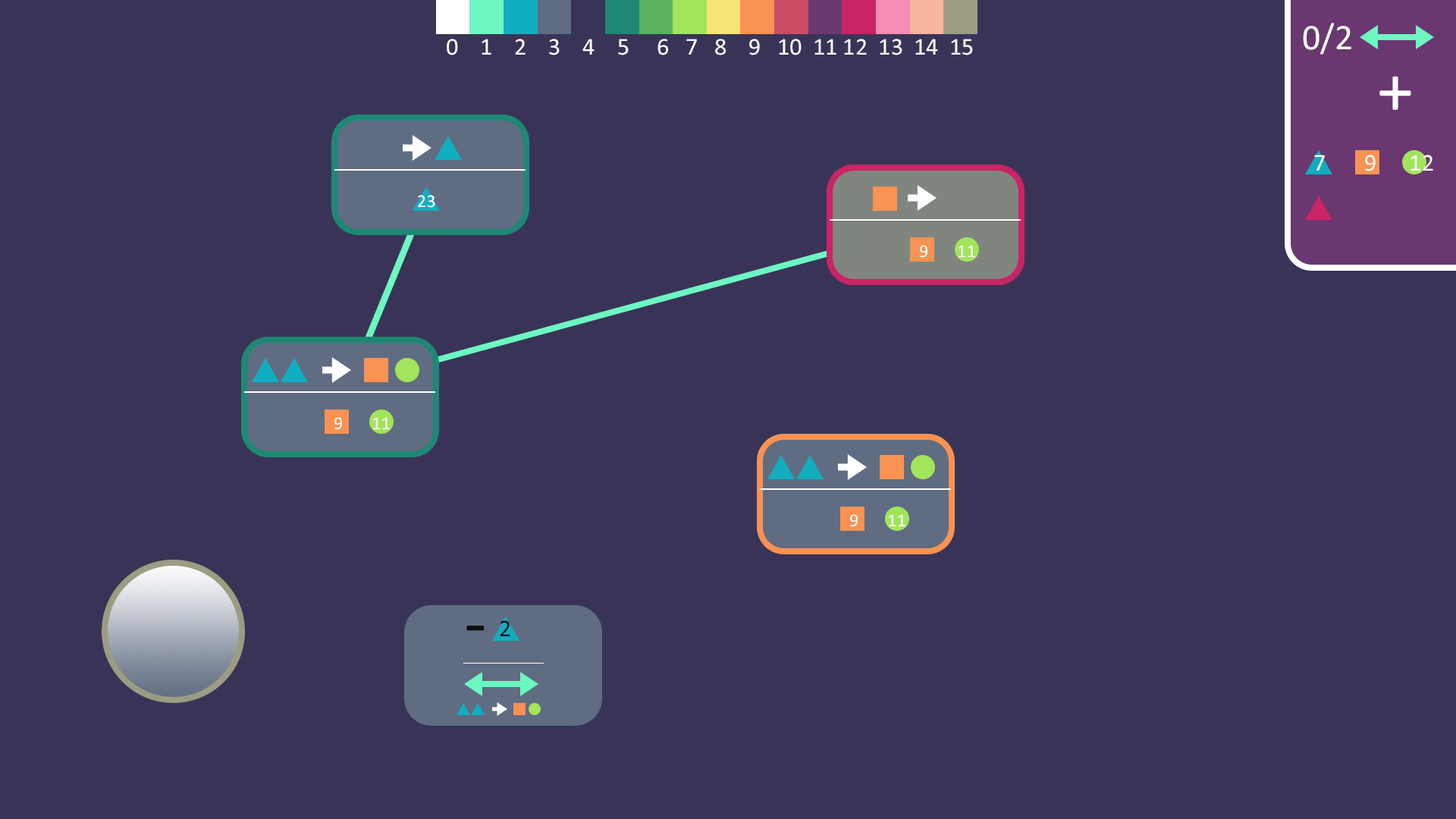
<style>
.page{position:relative;width:1456px;height:819px;background:#393457}
.page>*{position:absolute;margin:0}
.t1{font:36.4px "Calibri";color:#ffffff}
.t2{font:24.3px "Calibri";color:#ffffff}
.t3{font:72.8px "Calibri";color:#ffffff}
.t4{font:18.2px "Calibri";color:#ffffff}
.t5{font:72.8px "Calibri";color:#0f0f0f}
.t6{font:24.3px "Calibri";color:#0f0f0f}
</style>
<div class="page">
<p class="t1" style="left:1303px;top:23px;width:48px;height:32px">0/2</p>
<p class="t2" style="left:447px;top:39px;width:526px;height:16px">0    1    2    3    4    5     6   7   8    9   10  11 12  13  14  15</p>
<p class="t3" style="left:1379px;top:76px;width:32px;height:34px">+</p>
<p class="t2" style="left:1314px;top:155px;width:119px;height:16px">7       9      12</p>
<p class="t4" style="left:418px;top:195px;width:17px;height:13px">23</p>
<p class="t4" style="left:868px;top:245px;width:107px;height:13px">23        9       11</p>
<p class="t4" style="left:283px;top:417px;width:107px;height:13px">23        9       11</p>
<p class="t4" style="left:799px;top:514px;width:106px;height:13px">23        9       11</p>
<p class="t5" style="left:466px;top:626px;width:19px;height:5px">-</p>
<p class="t6" style="left:500px;top:620px;width:10px;height:16px">2</p>
</div>
